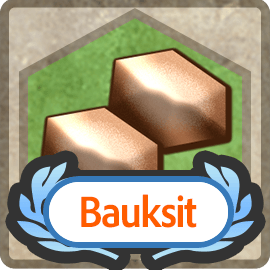
<style>
.page{position:relative;width:270px;height:270px}
.page>*{position:absolute;margin:0}
.t1{font:45px "AdobeClean-Bold";letter-spacing:-0.04em;color:#ff5d00;scale:0.9 1}
</style>
<div class="page">
<p class="t1" style="left:81px;top:194px;width:116px;height:34px">Bauksit</p>
</div>
